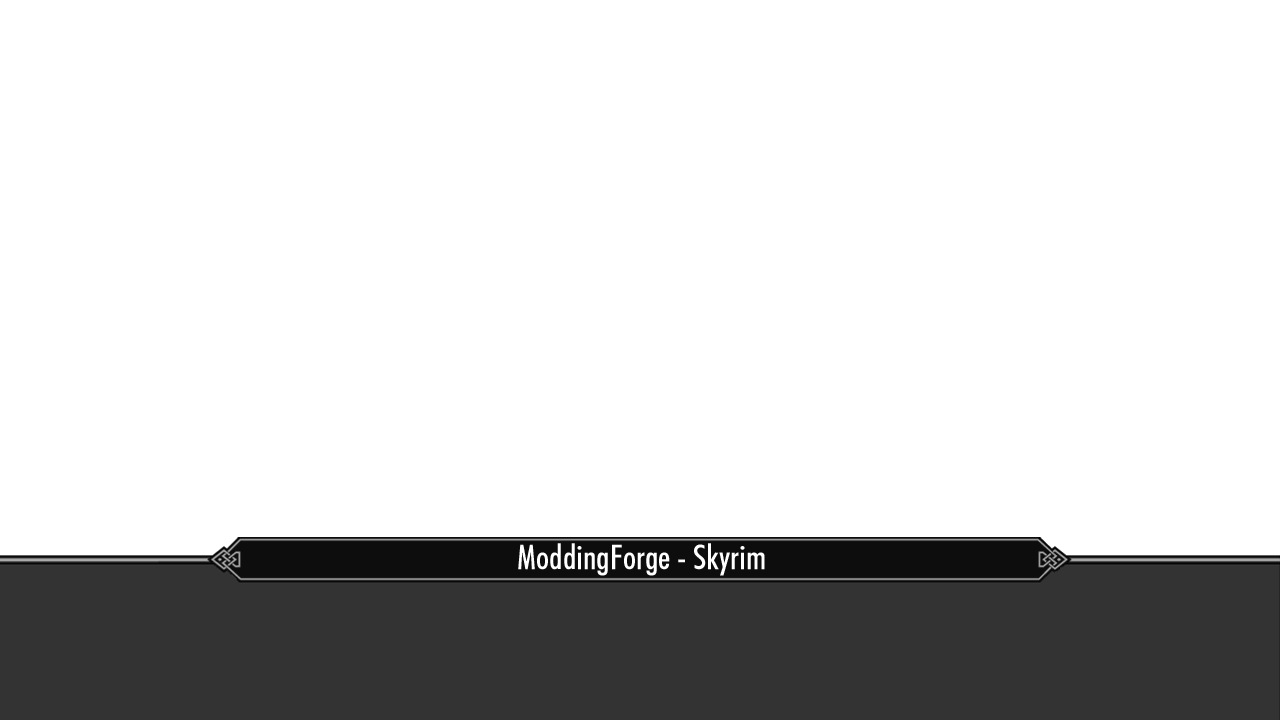
<style>
.page{position:relative;width:1280px;height:720px;background:#ffffff}
.page>*{position:absolute;margin:0}
.t1{font:34px "FuturaBT-MediumCondensed";color:#ffffff}
</style>
<div class="page">
<p class="t1" style="left:518px;top:543px;width:247px;height:33px">ModdingForge - Skyrim</p>
</div>
